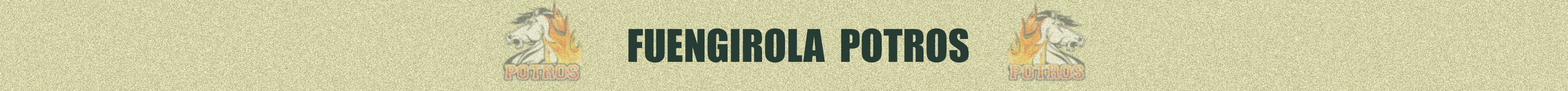
<style>
.page{position:relative;width:1568px;height:91px}
.page>*{position:absolute;margin:0}
.t1{font:41.8px "Impact";color:#263c34}
</style>
<div class="page">
<p class="t1" style="left:628px;top:28px;width:341px;height:35px">FUENGIROLA  POTROS</p>
</div>
